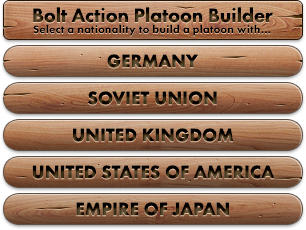
<style>
.page{position:relative;width:306px;height:230px}
.page>*{position:absolute;margin:0}
.t1{font:20px "FuturaPT-Heavy"}
.t2{font:11px "FuturaPT-Heavy";letter-spacing:0.035em;color:#000000}
.t3{font:18px "FuturaPT-Heavy";text-transform:uppercase;font-weight:bold}
</style>
<div class="page">
<p class="t1" style="left:33px;top:7px;width:240px;height:16px">Bolt Action Platoon Builder</p>
<p class="t2" style="left:33px;top:24px;width:238px;height:12px">Select a nationality to build a platoon with...</p>
<p class="t3" style="left:107px;top:54px;width:91px;height:14px">Germany</p>
<p class="t3" style="left:88px;top:91px;width:129px;height:14px">Soviet Union</p>
<p class="t3" style="left:73px;top:128px;width:160px;height:14px">United Kingdom</p>
<p class="t3" style="left:32px;top:165px;width:242px;height:14px">United States of America</p>
<p class="t3" style="left:76px;top:202px;width:153px;height:14px">Empire of Japan</p>
</div>
